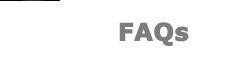
<style>
.page{position:relative;width:240px;height:60px;background:#ffffff}
.page>*{position:absolute;margin:0}
.t1{font:24px "Verdana-Bold";color:#7d7d7d;font-weight:bold}
</style>
<div class="page">
<p class="t1" style="left:119px;top:22px;width:70px;height:24px">FAQs</p>
</div>
